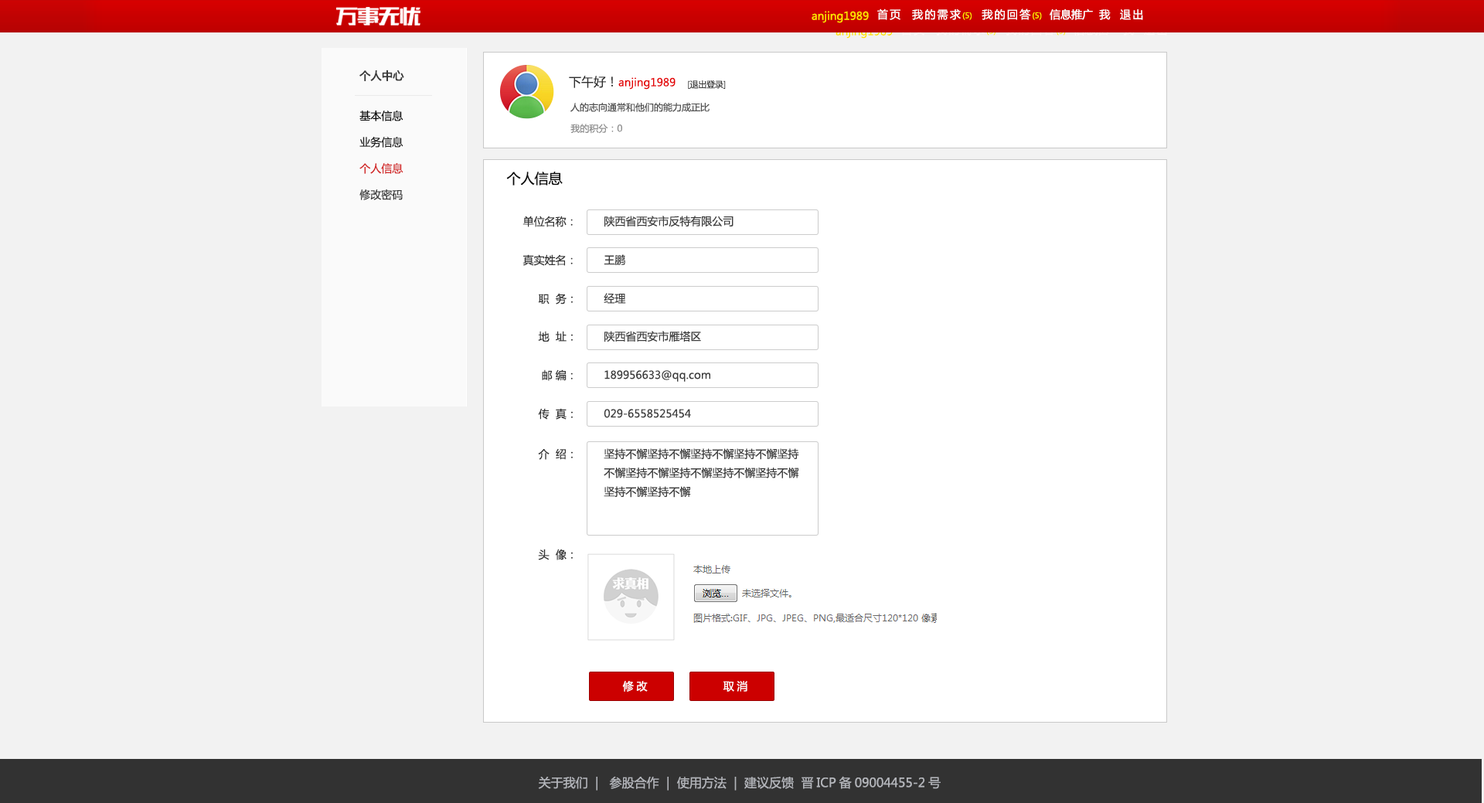
<style>
.page{position:relative;width:1484px;height:803px;background:#f2f2f2}
.page>*{position:absolute;margin:0}
.t1{font:10.8px "MicrosoftYaHei";color:#fee300}
.t2{font:10.8px "MicrosoftYaHei";letter-spacing:0.16em;color:#ffffff}
.t3{font:7.7px "MicrosoftYaHei";color:#fff600}
.t4{font:10.8px "MicrosoftYaHei";color:#ffffff}
.t5{font:10.8px "MicrosoftYaHei"}
.t6{font:10.8px "MicrosoftYaHei";color:#3a3a3a;font-weight:bold}
.t7{font:10.8px "MicrosoftYaHei";color:#e40002}
.t8{font:12.4px "MicrosoftYaHei";color:#2f2f2f}
.t9{font:8.5px "MicrosoftYaHei";letter-spacing:-0.02em;color:#3e3e3e}
.t10{font:10.8px/26.3px "MicrosoftYaHei";color:#070707}
.t11{font:10.8px/26.3px "MicrosoftYaHei";color:#1f1f1f}
.t12{font:10.8px/26.3px "MicrosoftYaHei";color:#d22222}
.t13{font:10.8px/26.3px "MicrosoftYaHei";color:#3a3a3a}
.t14{font:9.3px "MicrosoftYaHei";color:#4f4f4f}
.t15{font:9.3px "MicrosoftYaHei";color:#8f8f8f}
.t16{font:13.9px "MicrosoftYaHei";color:#060606}
.t17{font:10.8px "MicrosoftYaHei";color:#333333}
.t18{font:10.8px "MicrosoftYaHei";color:#3c3c3c}
.t19{font:10.8px "MicrosoftYaHei";letter-spacing:0.26em;color:#ffffff}
.t20{font:12.4px "MicrosoftYaHei";color:#b3b5ba}
</style>
<div class="page">
<p class="t1" style="left:812px;top:11px;width:57px;height:12px">anjing1989</p>
<p class="t2" style="left:878px;top:9px;width:265px;height:11px">首页  我的需求<span class="t3">(5)</span>  我的回答<span class="t3">(5)  </span><span class="t4"> 信息推广  我</span>  退出</p>
<p class="t5" style="left:836px;top:26px;width:57px;height:13px">anjing1989</p>
<p class="t6" style="left:360px;top:70px;width:44px;height:11px">个人中心</p>
<p class="t7" style="left:569px;top:76px;width:107px;height:14px"><span class="t8">下午好！</span>anjing1989</p>
<p class="t9" style="left:688px;top:80px;width:38px;height:9px">[退出登录]</p>
<p class="t10" style="left:360px;top:111px;width:44px;height:89px">基本信息<br><span class="t11">业务信息<br></span><span class="t12">个人信息<br></span><span class="t13">修改密码</span></p>
<p class="t14" style="left:571px;top:102px;width:139px;height:10px">人的志向通常和他们的能力成正比</p>
<p class="t15" style="left:571px;top:124px;width:51px;height:10px">我的积分：0</p>
<p class="t16" style="left:506px;top:172px;width:57px;height:14px">个人信息</p>
<p class="t17" style="left:523px;top:216px;width:50px;height:11px">单位名称：</p>
<p class="t18" style="left:605px;top:216px;width:129px;height:11px">陕西省西安市反特有限公司</p>
<p class="t17" style="left:523px;top:254px;width:50px;height:12px">真实姓名：</p>
<p class="t18" style="left:604px;top:254px;width:21px;height:11px">王鹏</p>
<p class="t17" style="left:538px;top:293px;width:35px;height:12px">职  务：</p>
<p class="t18" style="left:604px;top:293px;width:22px;height:11px">经理</p>
<p class="t17" style="left:538px;top:331px;width:35px;height:11px">地  址：</p>
<p class="t18" style="left:605px;top:331px;width:96px;height:12px">陕西省西安市雁塔区</p>
<p class="t17" style="left:542px;top:370px;width:31px;height:11px">邮 编：</p>
<p class="t18" style="left:605px;top:370px;width:106px;height:12px">189956633@qq.com</p>
<p class="t17" style="left:538px;top:408px;width:35px;height:12px">传  真：</p>
<p class="t18" style="left:604px;top:409px;width:87px;height:9px">029-6558525454</p>
<p class="t17" style="left:538px;top:448px;width:35px;height:12px">介  绍：</p>
<p class="t18" style="left:604px;top:448px;width:195px;height:50px">坚持不懈坚持不懈坚持不懈坚持不懈坚持<br>不懈坚持不懈坚持不懈坚持不懈坚持不懈<br>坚持不懈坚持不懈</p>
<p class="t17" style="left:538px;top:549px;width:35px;height:12px">头  像：</p>
<p class="t19" style="left:622px;top:681px;width:26px;height:11px">修改</p>
<p class="t19" style="left:723px;top:681px;width:25px;height:11px">取消</p>
<p class="t20" style="left:538px;top:776px;width:403px;height:15px">关于我们  |   参股合作  |  使用方法  |  建议反馈  晋ICP备09004455-2号</p>
</div>
